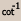
<style>
.page{position:relative;width:21px;height:21px;background:#d9cdc1}
.page>*{position:absolute;margin:0}
.t1{font:9px "Tahoma";color:#000000}
</style>
<div class="page">
<p class="t1" style="left:12px;top:2px;width:8px;height:7px">-1</p>
<p class="t1" style="left:2px;top:8px;width:13px;height:8px">cot</p>
</div>
